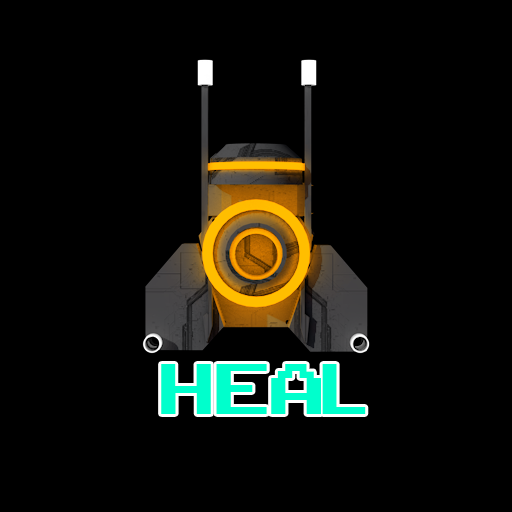
<style>
.page{position:relative;width:512px;height:512px;background:#000000}
.page>*{position:absolute;margin:0}
.t1{font:100px "ArcadeClassic";color:#00ffcc}
</style>
<div class="page">
<p class="t1" style="left:161px;top:364px;width:205px;height:50px">Heal</p>
</div>
